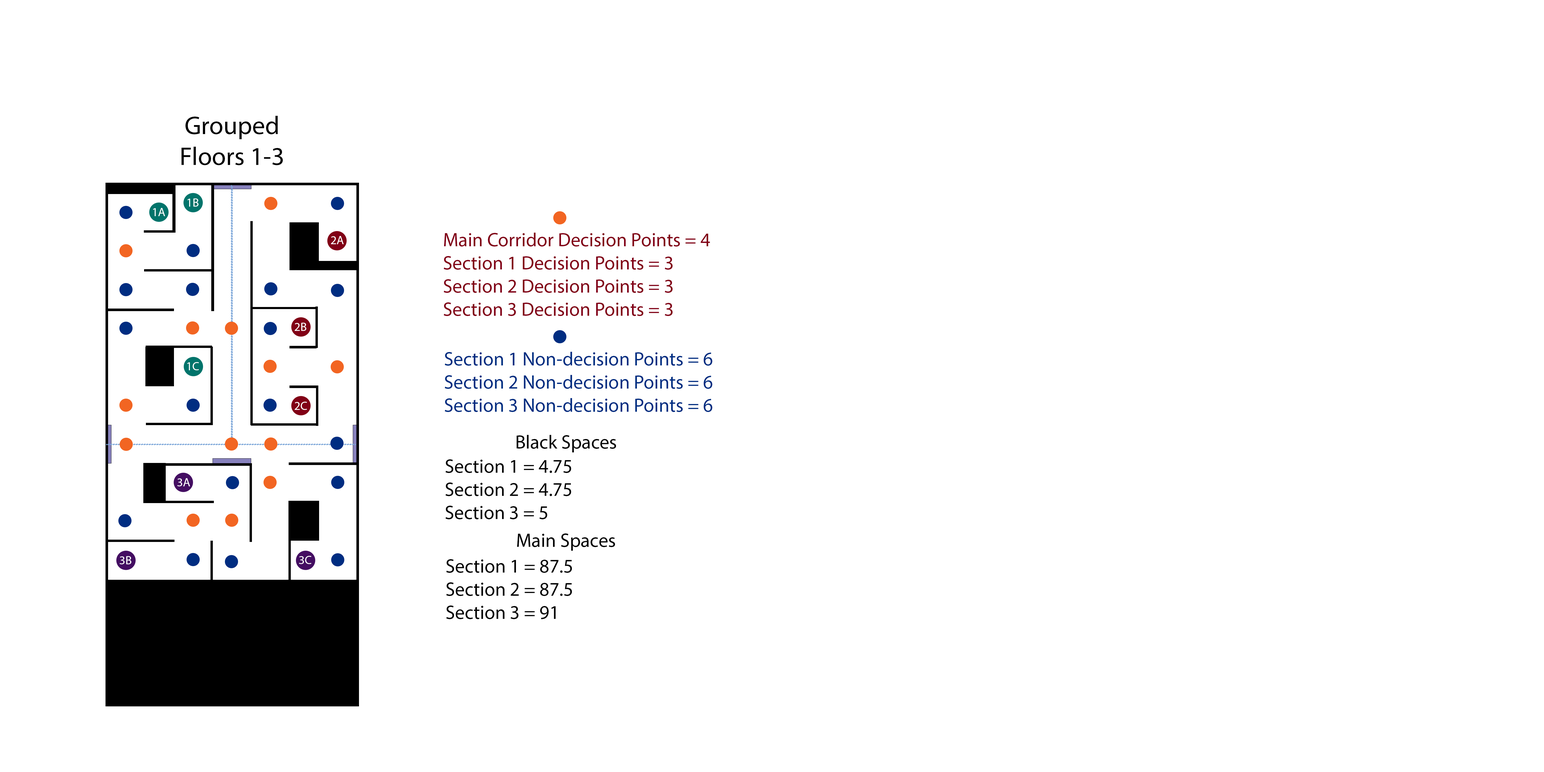
<style>
.page{position:relative;width:1544px;height:772px;background:#ffffff}
.page>*{position:absolute;margin:0}
.t1{font:25.7px "MyriadPro-Regular";color:#000000}
.t2{font:12.1px "MyriadPro-Regular";color:#ffffff}
.t3{font:19.3px "MyriadPro-Regular";color:#810016}
.t4{font:19.3px "MyriadPro-Regular";color:#002d81}
.t5{font:19.3px "MyriadPro-Regular";color:#000000}
</style>
<div class="page">
<p class="t1" style="left:181px;top:116px;width:102px;height:49px;text-align:center">Grouped<br>Floors 1-3</p>
<p class="t2" style="left:153px;top:208px;width:12px;height:8px">1A</p>
<p class="t2" style="left:187px;top:198px;width:12px;height:9px">1B</p>
<p class="t3" style="left:444px;top:233px;width:266px;height:83px">Main Corridor Decision Points = 4<br>Section 1 Decision Points = 3<br>Section 2 Decision Points = 3<br>Section 3 Decision Points = 3</p>
<p class="t2" style="left:331px;top:236px;width:13px;height:8px">2A</p>
<p class="t2" style="left:295px;top:323px;width:12px;height:8px">2B</p>
<p class="t4" style="left:445px;top:352px;width:267px;height:60px">Section 1 Non-decision Points = 6<br>Section 2 Non-decision Points = 6<br>Section 3 Non-decision Points = 6</p>
<p class="t2" style="left:187px;top:362px;width:12px;height:8px">1C</p>
<p class="t2" style="left:295px;top:402px;width:12px;height:8px">2C</p>
<p class="t5" style="left:517px;top:435px;width:99px;height:17px">Black Spaces</p>
<p class="t5" style="left:446px;top:459px;width:125px;height:60px">Section 1 = 4.75<br>Section 2 = 4.75<br>Section 3 = 5</p>
<p class="t2" style="left:177px;top:478px;width:13px;height:8px">3A</p>
<p class="t5" style="left:517px;top:534px;width:98px;height:17px">Main Spaces</p>
<p class="t2" style="left:120px;top:556px;width:12px;height:8px">3B</p>
<p class="t2" style="left:299px;top:556px;width:12px;height:8px">3C</p>
<p class="t5" style="left:446px;top:559px;width:126px;height:60px">Section 1 = 87.5<br>Section 2 = 87.5<br>Section 3 = 91</p>
</div>
